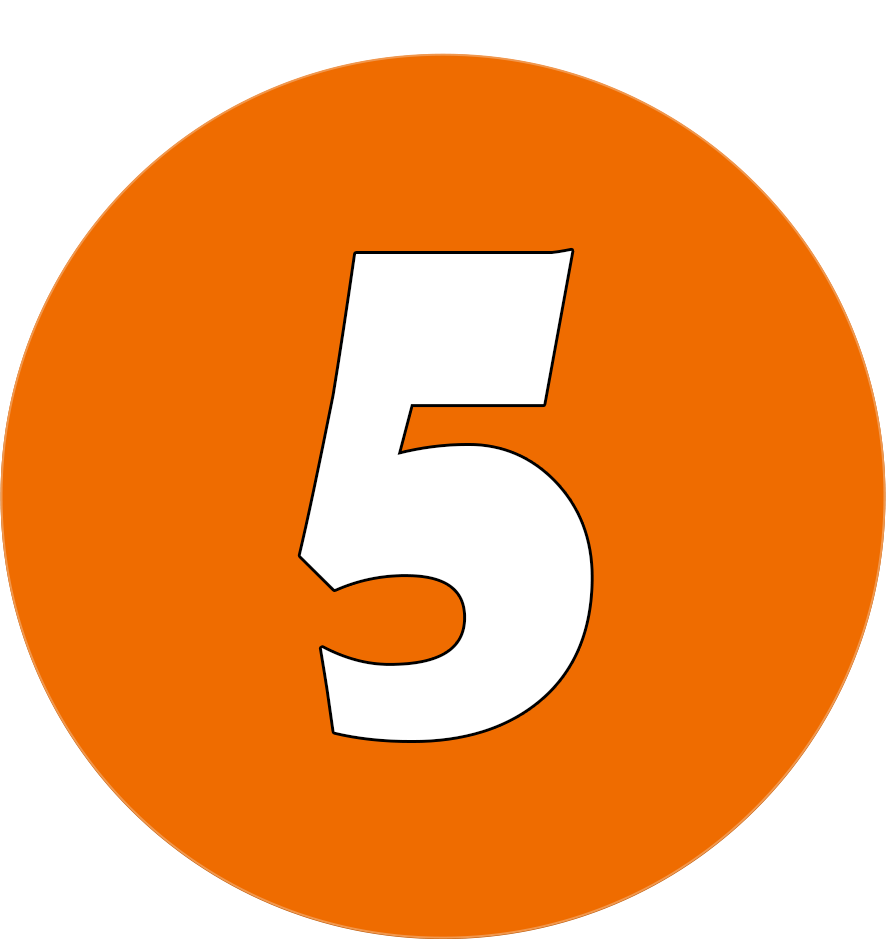
<style>
.page{position:relative;width:886px;height:939px;background:#ef6c00}
.page>*{position:absolute;margin:0}
.t1{font:637.2px "ShowcardGothic-Reg";color:#ffffff}
</style>
<div class="page">
<p class="t1" style="left:300px;top:250px;width:291px;height:490px">5</p>
</div>
